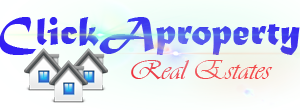
<style>
.page{position:relative;width:300px;height:110px}
.page>*{position:absolute;margin:0}
.t1{font:42px "MaturaMTScriptCapitals"}
.t2{font:29px "Vivaldii";color:#ef4c50}
</style>
<div class="page">
<p class="t1" style="left:0px;top:17px;width:300px;height:38px">ClickAproperty</p>
<p class="t2" style="left:131px;top:60px;width:142px;height:20px">Real Estates</p>
</div>
